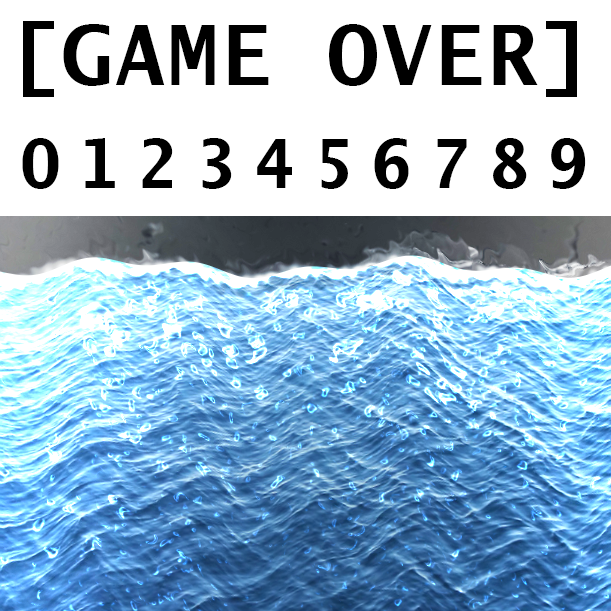
<style>
.page{position:relative;width:611px;height:611px;background:#ffffff}
.page>*{position:absolute;margin:0}
.t1{font:83px "LucidaSans-TypewriterBold";letter-spacing:0.04em;color:#000000}
.t2{font:68px "LucidaSans-TypewriterBold";letter-spacing:0.26em;color:#000000}
</style>
<div class="page">
<p class="t1" style="left:23px;top:21px;width:554px;height:76px">[GAME OVER]</p>
<p class="t2" style="left:22px;top:138px;width:564px;height:51px">0123456789</p>
</div>
